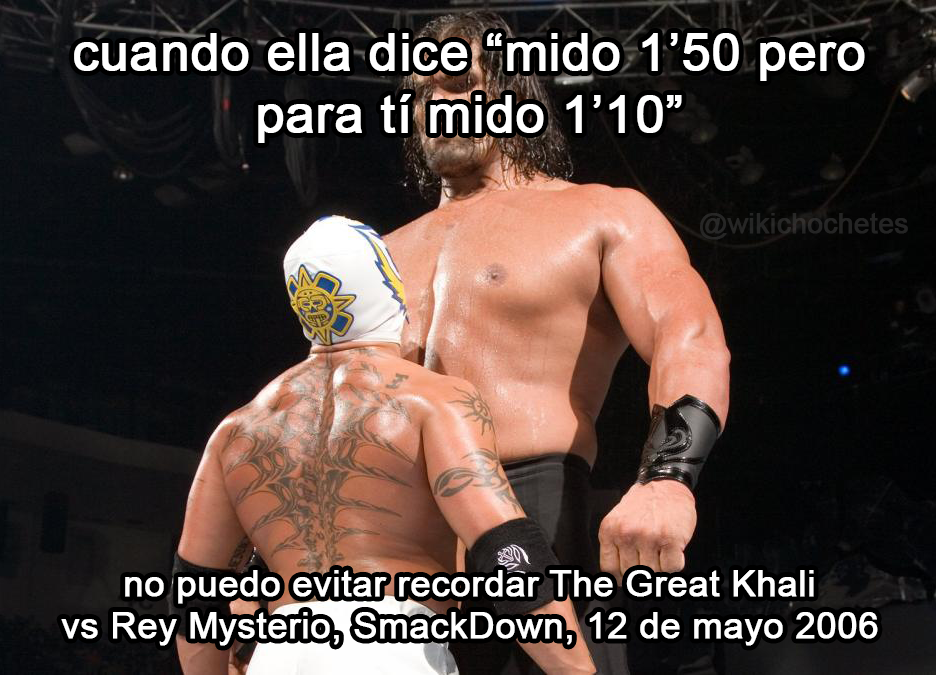
<style>
.page{position:relative;width:936px;height:675px}
.page>*{position:absolute;margin:0}
.t1{font:51.9px "ArialMT";color:#ffffff;font-weight:bold}
.t2{font:27.6px "ArialMT";color:#252525;font-weight:bold}
.t3{font:36px "ArialMT";color:#ffffff;font-weight:bold}
</style>
<div class="page">
<p class="t1" style="left:74px;top:33px;width:791px;height:110px;text-align:center">cuando ella dice “mido 1’50 pero<br>para tí mido 1’10”</p>
<p class="t2" style="left:700px;top:213px;width:208px;height:27px">@wikichochetes</p>
<p class="t3" style="left:61px;top:570px;width:817px;height:76px;text-align:center">no puedo evitar recordar The Great Khali<br>vs Rey Mysterio, SmackDown, 12 de mayo 2006</p>
</div>
